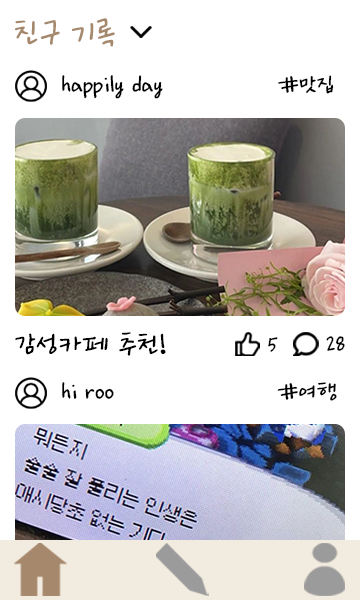
<style>
.page{position:relative;width:360px;height:600px;background:#ffffff}
.page>*{position:absolute;margin:0}
.t1{font:35px "Ownglyph_Dailyokja-Rg";color:#a6886d}
.t2{font:25px "Ownglyph_Dailyokja-Rg";color:#000000}
.t3{font:30px "Ownglyph_Dailyokja-Rg";color:#000000}
.t4{font:22px "Ownglyph_Dailyokja-Rg";color:#000000}
</style>
<div class="page">
<p class="t1" style="left:15px;top:18px;width:100px;height:29px">친구 기록</p>
<p class="t2" style="left:62px;top:75px;width:272px;height:24px">happily day    #맛집</p>
<p class="t3" style="left:15px;top:332px;width:151px;height:24px">감성카페 추천!</p>
<p class="t4" style="left:268px;top:337px;width:10px;height:15px">5</p>
<p class="t4" style="left:326px;top:336px;width:19px;height:15px">28</p>
<p class="t2" style="left:62px;top:382px;width:275px;height:19px">hi roo     #여행</p>
</div>
